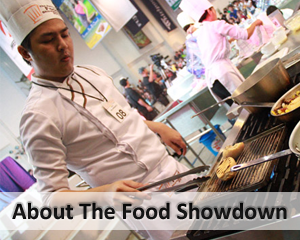
<style>
.page{position:relative;width:300px;height:240px}
.page>*{position:absolute;margin:0}
.t1{font:24px "Calibri-Bold";color:#000000}
</style>
<div class="page">
<p class="t1" style="left:12px;top:202px;width:275px;height:18px">About The Food Showdown</p>
</div>
